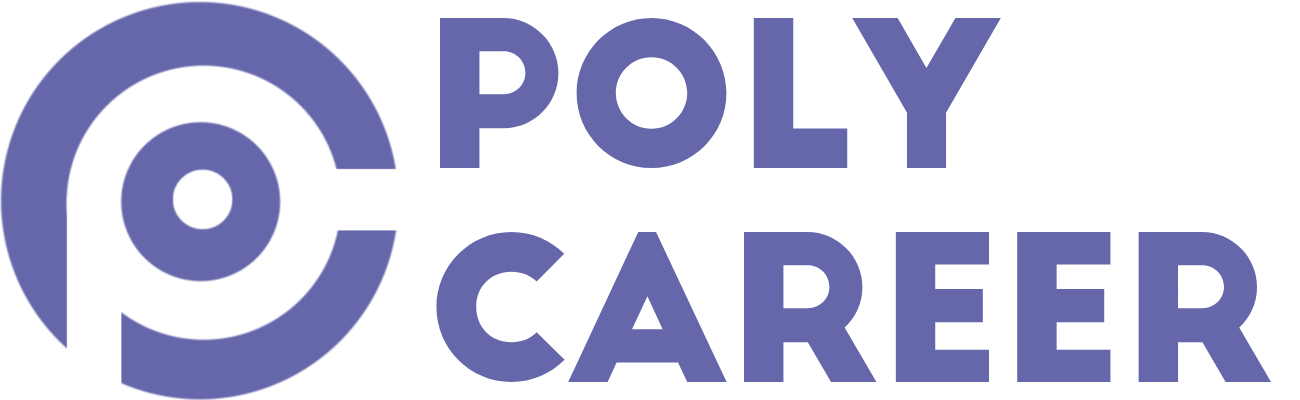
<style>
.page{position:relative;width:1300px;height:400px;background:#ffffff}
.page>*{position:absolute;margin:0}
.t1{font:200px/214px "BigJohn";color:#6667ab}
.t2{font:200px/214px "BigJohn";letter-spacing:-0.082em;color:#6667ab}
.t3{font:200px/214px "BigJohn";letter-spacing:-0.013em;color:#6667ab}
</style>
<div class="page">
<p class="t1" style="left:436px;top:18px;width:836px;height:364px">POLY<br><span class="t2">C</span><span class="t3">A</span>REER</p>
</div>
